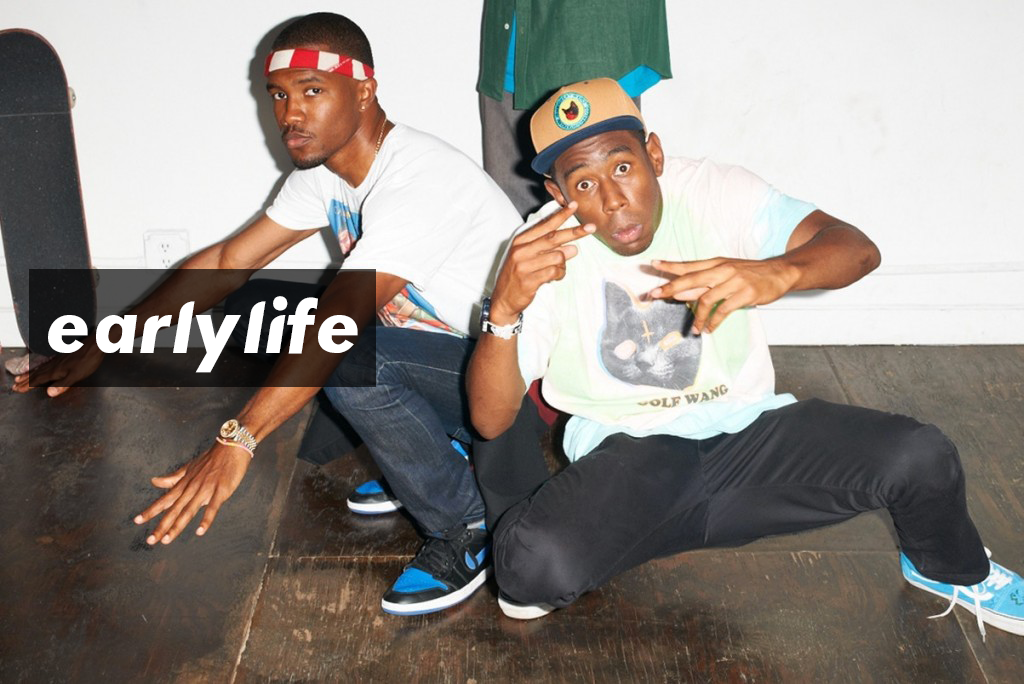
<style>
.page{position:relative;width:1024px;height:684px}
.page>*{position:absolute;margin:0}
.t1{font:44px "Blonde";color:#ffffff}
</style>
<div class="page">
<p class="t1" style="left:48px;top:296px;width:310px;height:77px;text-align:center">early life</p>
</div>
